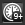
<style>
.page{position:relative;width:25px;height:25px;background:#333333}
.page>*{position:absolute;margin:0}
.t1{font:8px "ArialMT";color:#ffffff}
</style>
<div class="page">
<p class="t1" style="left:14px;top:13px;width:9px;height:6px">9+</p>
</div>
